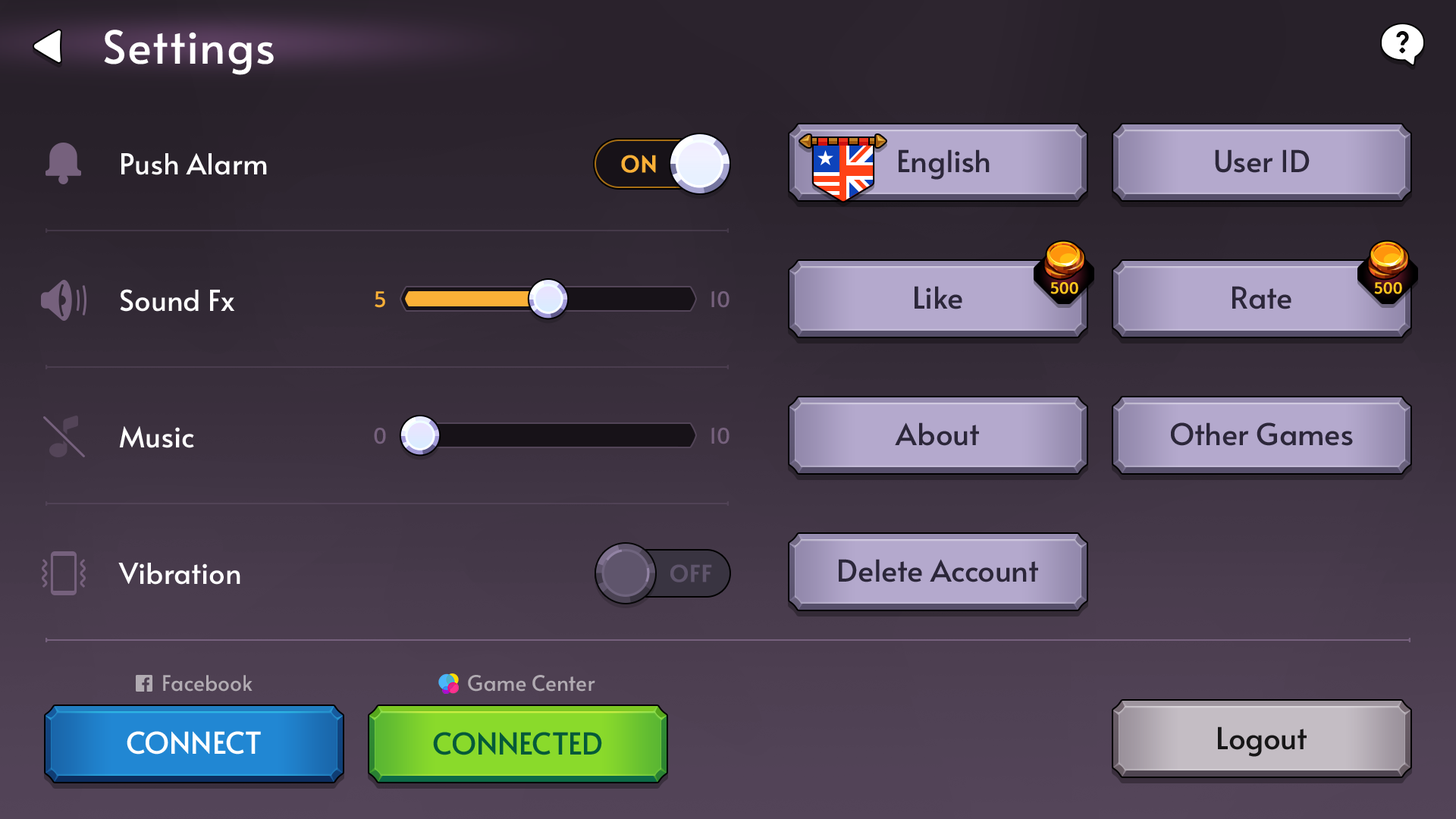
<style>
.page{position:relative;width:1456px;height:819px}
.page>*{position:absolute;margin:0}
.t1{font:45.5px "Alata-Regular";color:#ffffff}
.t2{font:30.3px "Alata-Regular";color:#2c273a}
.t3{font:28.8px/136.5px "Alata-Regular";color:#ffffff}
.t4{font:22.7px "Alata-Regular";color:#fab037;text-transform:uppercase;font-weight:bold}
.t5{font:21.2px "Alata-Regular";color:#fab037}
.t6{font:21.2px "Alata-Regular";color:#76617d}
.t7{font:15.2px "Alata-Regular";color:#ffc71e;font-weight:bold}
.t8{font:22.7px "Alata-Regular";color:#5f556c;text-transform:uppercase;font-weight:bold}
.t9{font:21.2px "Alata-Regular";color:#b1abb2}
.t10{font:30.3px "Alata-Regular";color:#ffffff;text-transform:uppercase}
.t11{font:30.3px "Alata-Regular";color:#045a39;text-transform:uppercase}
.t12{font:30.3px "Alata-Regular";color:#171617}
</style>
<div class="page">
<p class="t1" style="left:104px;top:30px;width:170px;height:45px">Settings</p>
<p class="t2" style="left:899px;top:149px;width:91px;height:31px">English</p>
<p class="t2" style="left:1215px;top:149px;width:95px;height:24px">User ID</p>
<p class="t3" style="left:118px;top:153px;width:149px;height:432px">Push Alarm<br>Sound Fx<br>Music<br>Vibration</p>
<p class="t4" style="left:621px;top:155px;width:35px;height:18px">on</p>
<p class="t5" style="left:375px;top:291px;width:10px;height:17px">5</p>
<p class="t6" style="left:711px;top:290px;width:19px;height:18px">10</p>
<p class="t2" style="left:915px;top:286px;width:47px;height:23px">Like</p>
<p class="t7" style="left:1050px;top:282px;width:28px;height:12px">500</p>
<p class="t2" style="left:1232px;top:286px;width:59px;height:23px">Rate</p>
<p class="t7" style="left:1374px;top:282px;width:28px;height:12px">500</p>
<p class="t2" style="left:895px;top:422px;width:84px;height:24px">About</p>
<p class="t2" style="left:1171px;top:422px;width:182px;height:24px">Other Games</p>
<p class="t6" style="left:374px;top:428px;width:12px;height:16px">0</p>
<p class="t6" style="left:711px;top:427px;width:19px;height:17px">10</p>
<p class="t8" style="left:670px;top:564px;width:42px;height:18px">off</p>
<p class="t2" style="left:839px;top:559px;width:199px;height:23px">Delete Account</p>
<p class="t9" style="left:163px;top:675px;width:90px;height:17px">Facebook</p>
<p class="t9" style="left:468px;top:675px;width:127px;height:17px">Game Center</p>
<p class="t10" style="left:127px;top:731px;width:134px;height:24px">Connect</p>
<p class="t11" style="left:433px;top:732px;width:169px;height:23px">Connected</p>
<p class="t12" style="left:1218px;top:726px;width:89px;height:31px">Logout</p>
</div>
